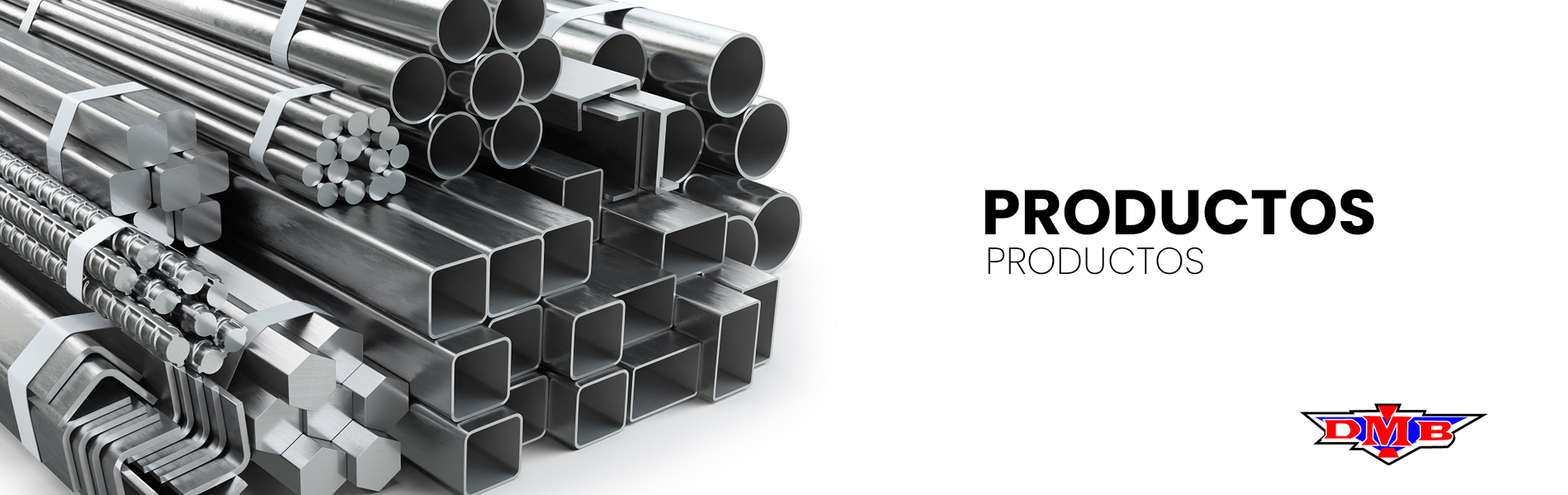
<style>
.page{position:relative;width:1568px;height:495px;background:#ffffff}
.page>*{position:absolute;margin:0}
.t1{font:63.3px "Poppins-Bold";color:#000000}
.t2{font:37.5px "Poppins-ExtraLight";color:#000000}
</style>
<div class="page">
<p class="t1" style="left:985px;top:189px;width:389px;height:46px">PRODUCTOS</p>
<p class="t2" style="left:988px;top:247px;width:215px;height:28px">PRODUCTOS</p>
</div>
